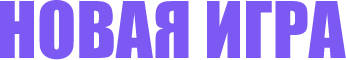
<style>
.page{position:relative;width:346px;height:60px;background:#7d59f4}
.page>*{position:absolute;margin:0}
.t1{font:72px "Impact";color:#7d59f4}
</style>
<div class="page">
<p class="t1" style="left:0px;top:0px;width:346px;height:60px">НОВАЯ ИГРА</p>
</div>
